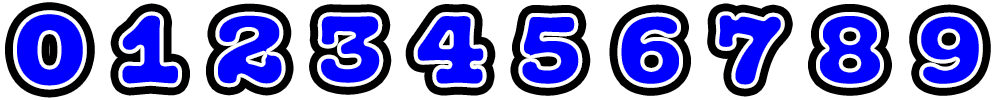
<style>
.page{position:relative;width:1000px;height:100px;background:#ffffff}
.page>*{position:absolute;margin:0}
.t1{font:108.3px "Olivita-Regular";color:#0000ff;font-weight:bold}
.t2{font:104.2px "Olivita-Regular";color:#0000ff;font-weight:bold}
</style>
<div class="page">
<p class="t1" style="left:13px;top:10px;width:74px;height:80px">0</p>
<p class="t2" style="left:118px;top:11px;width:64px;height:77px">1</p>
<p class="t2" style="left:213px;top:11px;width:73px;height:77px">2</p>
<p class="t2" style="left:317px;top:12px;width:67px;height:75px">3</p>
<p class="t2" style="left:413px;top:12px;width:75px;height:76px">4</p>
<p class="t2" style="left:518px;top:13px;width:65px;height:75px">5</p>
<p class="t2" style="left:617px;top:12px;width:66px;height:76px">6</p>
<p class="t2" style="left:715px;top:11px;width:70px;height:78px">7</p>
<p class="t2" style="left:816px;top:12px;width:68px;height:76px">8</p>
<p class="t2" style="left:917px;top:12px;width:66px;height:76px">9</p>
</div>
